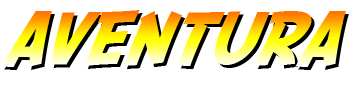
<style>
.page{position:relative;width:361px;height:86px;background:#ffffff}
.page>*{position:absolute;margin:0}
.t1{font:61px "SFFedora"}
</style>
<div class="page">
<p class="t1" style="left:1px;top:10px;width:345px;height:57px">AVENTURA</p>
</div>
